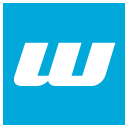
<style>
.page{position:relative;width:128px;height:128px;background:#00a9da}
.page>*{position:absolute;margin:0}
.t1{font:130px "Magneto-Bold";letter-spacing:-0.05em;color:#ffffff}
</style>
<div class="page">
<p class="t1" style="left:14px;top:42px;width:102px;height:44px">w</p>
</div>
